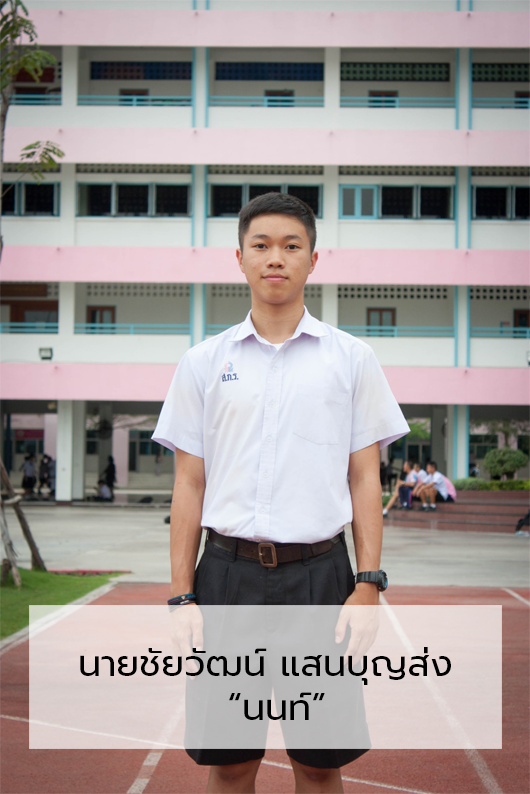
<style>
.page{position:relative;width:530px;height:794px}
.page>*{position:absolute;margin:0}
.t1{font:36.7px "Prompt-Regular";color:#000000}
</style>
<div class="page">
<p class="t1" style="left:80px;top:647px;width:371px;height:73px">นายชัยวัฒน์ แสนบุญส่ง<br>           “นนท์”</p>
</div>
